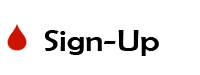
<style>
.page{position:relative;width:200px;height:75px;background:#ffffff}
.page>*{position:absolute;margin:0}
.t1{font:29.6px "BerlinSansFB-Reg";color:#000000;scale:1.17 1}
</style>
<div class="page">
<p class="t1" style="left:44px;top:30px;width:115px;height:26px">Sign-Up</p>
</div>
